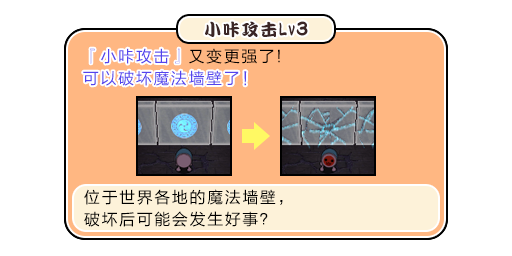
<style>
.page{position:relative;width:512px;height:256px;background:#ffffff}
.page>*{position:absolute;margin:0}
.t1{font:17px "DFPKanTingLiuW9";letter-spacing:0.1em;color:#3b2626}
.t2{font:18.7px "DFPKanTingLiuW9";letter-spacing:0.1em;color:#3b2626;scale:0.59 1}
.t3{font:20.4px "DFPKanTingLiuW9";letter-spacing:0.1em;color:#3b2626;scale:0.83 1}
.t4{font:16px/22px "FZLTHJW--GB1-0";letter-spacing:0.1em;color:#5444ed}
.t5{font:16px/22px "FZLTHJW--GB1-0";letter-spacing:0.1em;color:#000000}
</style>
<div class="page">
<p class="t1" style="left:205px;top:21px;width:103px;height:17px">小咔攻击<span class="t2">Lv</span><span class="t3">3</span></p>
<p class="t4" style="left:83px;top:48px;width:197px;height:38px">『小咔攻击』<span class="t5">又变更强了!<br></span>可以破坏魔法墙壁了！</p>
<p class="t4" style="left:83px;top:48px;width:164px;height:38px">『小咔攻击』<br>可以破坏魔法墙壁了！</p>
<p class="t5" style="left:84px;top:189px;width:199px;height:38px">位于世界各地的魔法墙壁，<br>破坏后可能会发生好事？</p>
</div>
